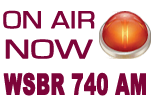
<style>
.page{position:relative;width:152px;height:109px;background:#ffffff}
.page>*{position:absolute;margin:0}
.t1{font:25px "EurostileRegular";color:#7d0439;font-weight:bold;scale:1.18 1}
.t2{font:27.3px "EurostileRegular";color:#7d0439;font-weight:bold;scale:1.37 1}
.t3{font:29.1px "Arial-Black";color:#7d0439;font-weight:bold;scale:0.62 1}
</style>
<div class="page">
<p class="t1" style="left:3px;top:10px;width:92px;height:19px">ON AIR</p>
<p class="t2" style="left:5px;top:39px;width:88px;height:20px">NOW</p>
<p class="t3" style="left:3px;top:72px;width:143px;height:24px">WSBR 740 AM</p>
</div>
